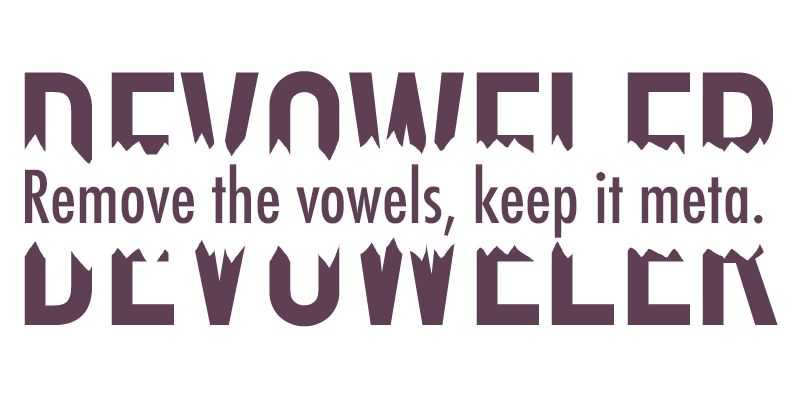
<style>
.page{position:relative;width:800px;height:400px;background:#ffffff}
.page>*{position:absolute;margin:0}
.t1{font:70.8px "Futura-CondensedMedium";color:#5f3f53}
</style>
<div class="page">
<p class="t1" style="left:25px;top:164px;width:738px;height:74px">Remove the vowels, keep it meta.</p>
</div>
